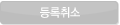
<style>
.page{position:relative;width:120px;height:25px;background:#bdbdbd}
.page>*{position:absolute;margin:0}
.t1{font:12.1px "YDIYGO330";color:#ffffff;scale:0.91 1}
</style>
<div class="page">
<p class="t1" style="left:40px;top:7px;width:40px;height:11px">등록취소</p>
</div>
